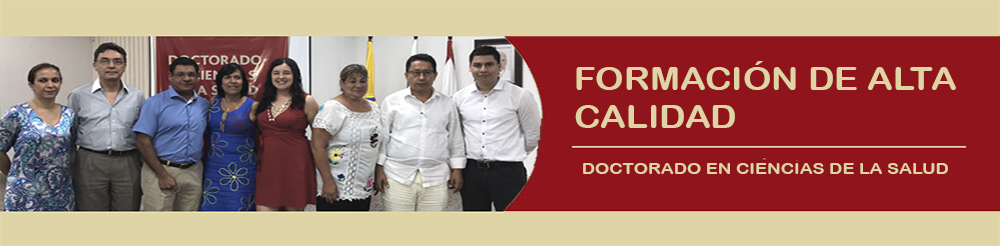
<style>
.page{position:relative;width:1000px;height:246px;background:#dfd4a6}
.page>*{position:absolute;margin:0}
.t1{font:31.9px "ArialRoundedMTBold";color:#dfd4a6;scale:1.13 1}
.t2{font:15.9px "ArialRoundedMTBold";color:#dfd4a6;scale:1.13 1}
</style>
<div class="page">
<p class="t1" style="left:575px;top:61px;width:381px;height:67px">FORMACIÓN DE ALTA CALIDAD</p>
<p class="t2" style="left:583px;top:163px;width:365px;height:11px">DOCTORADO EN CIENCIAS DE LA SALUD</p>
</div>
